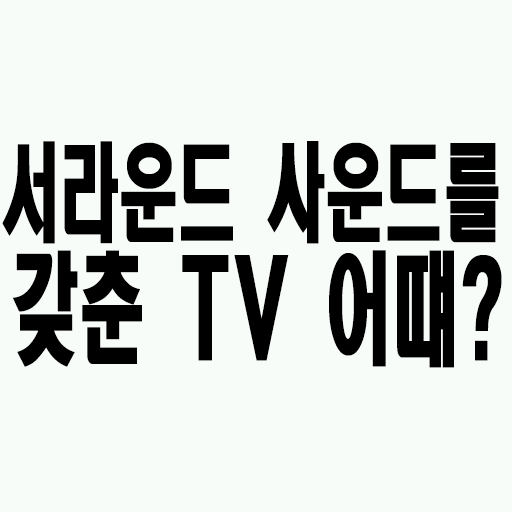
<style>
.page{position:relative;width:512px;height:512px;background:#f8fcf8}
.page>*{position:absolute;margin:0}
.t1{font:106.2px "HeadlineR-HM";color:#000000;scale:0.56 1}
.t2{font:120.6px "HeadlineR-HM";color:#000000;scale:0.56 1}
</style>
<div class="page">
<p class="t1" style="left:2px;top:141px;width:497px;height:103px">서라운드 사운드를</p>
<p class="t2" style="left:12px;top:250px;width:490px;height:118px">갖춘 TV 어떄?</p>
</div>
